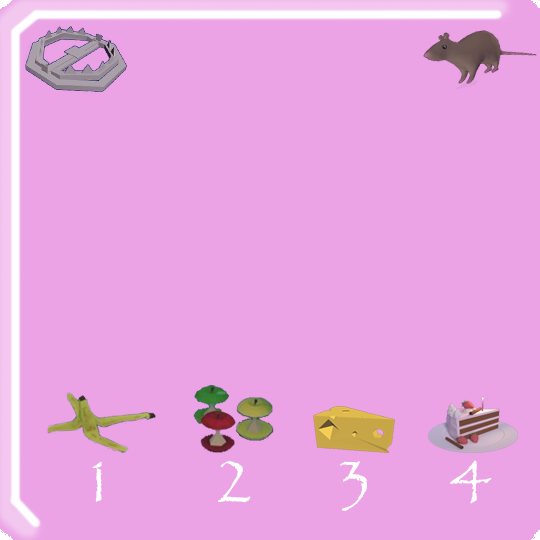
<style>
.page{position:relative;width:540px;height:540px;background:#eba3e5}
.page>*{position:absolute;margin:0}
.t1{font:72px "Papyrus-Regular";color:#ffffff}
</style>
<div class="page">
<p class="t1" style="left:92px;top:462px;width:10px;height:40px">1</p>
<p class="t1" style="left:218px;top:461px;width:33px;height:42px">2</p>
<p class="t1" style="left:340px;top:461px;width:27px;height:50px">3</p>
<p class="t1" style="left:450px;top:460px;width:42px;height:44px">4</p>
</div>
